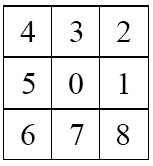
<style>
.page{position:relative;width:153px;height:166px;background:#ffffff}
.page>*{position:absolute;margin:0}
.t1{font:32px "TimesNewRomanPSMT";color:#000000}
</style>
<div class="page">
<p class="t1" style="left:20px;top:21px;width:15px;height:21px">4</p>
<p class="t1" style="left:70px;top:21px;width:13px;height:21px">3</p>
<p class="t1" style="left:116px;top:21px;width:15px;height:21px">2</p>
<p class="t1" style="left:22px;top:73px;width:13px;height:21px">5</p>
<p class="t1" style="left:69px;top:73px;width:14px;height:21px">0</p>
<p class="t1" style="left:119px;top:73px;width:10px;height:21px">1</p>
<p class="t1" style="left:21px;top:124px;width:14px;height:21px">6</p>
<p class="t1" style="left:70px;top:124px;width:14px;height:21px">7</p>
<p class="t1" style="left:116px;top:124px;width:14px;height:21px">8</p>
</div>
